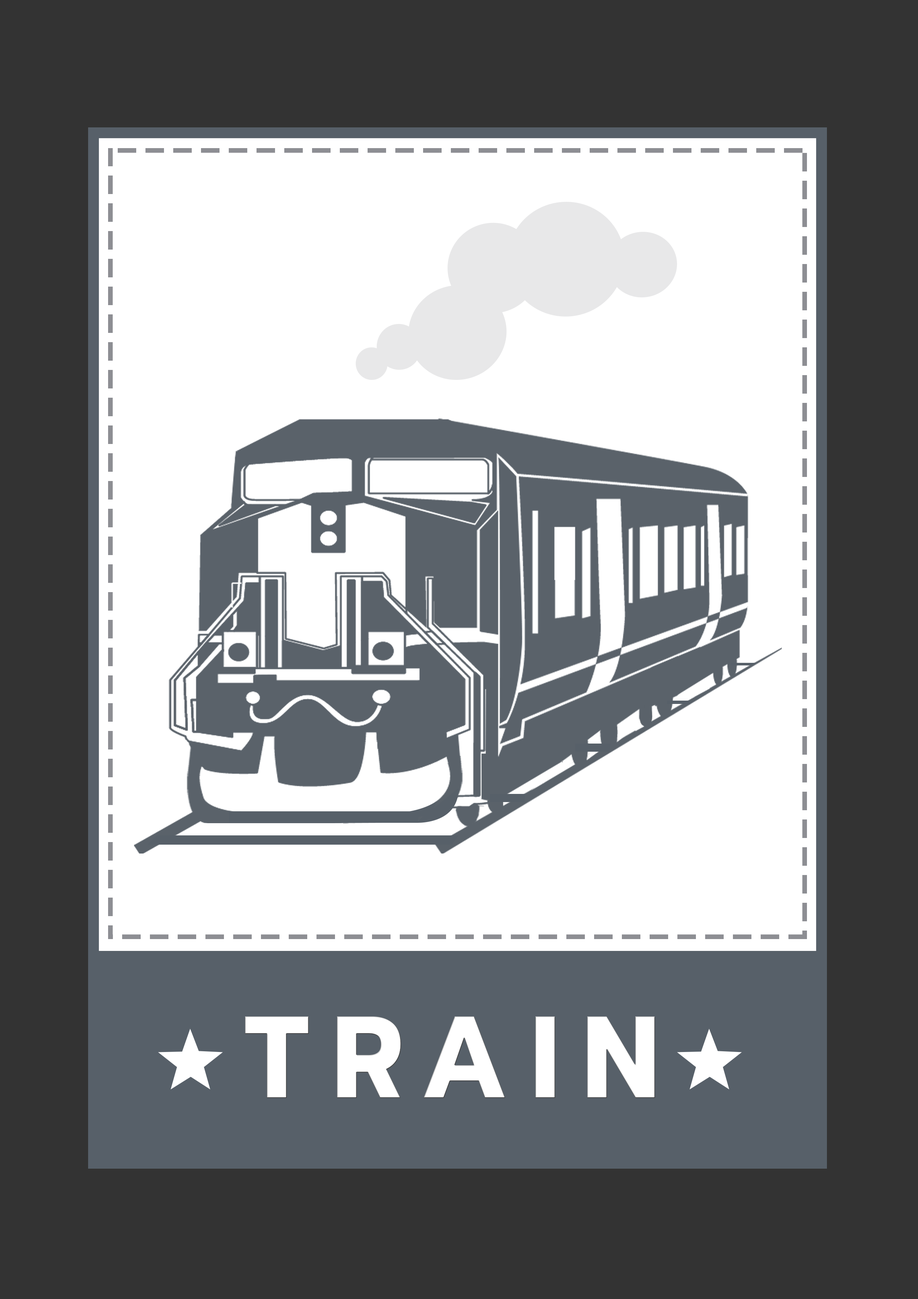
<style>
.page{position:relative;width:918px;height:1299px;background:#333333}
.page>*{position:absolute;margin:0}
.t1{font:116.5px "Prompt-Bold";letter-spacing:0.2em;color:#ffffff;scale:0.95 1}
</style>
<div class="page">
<p class="t1" style="left:245px;top:1016px;width:410px;height:82px">TRAIN</p>
</div>
